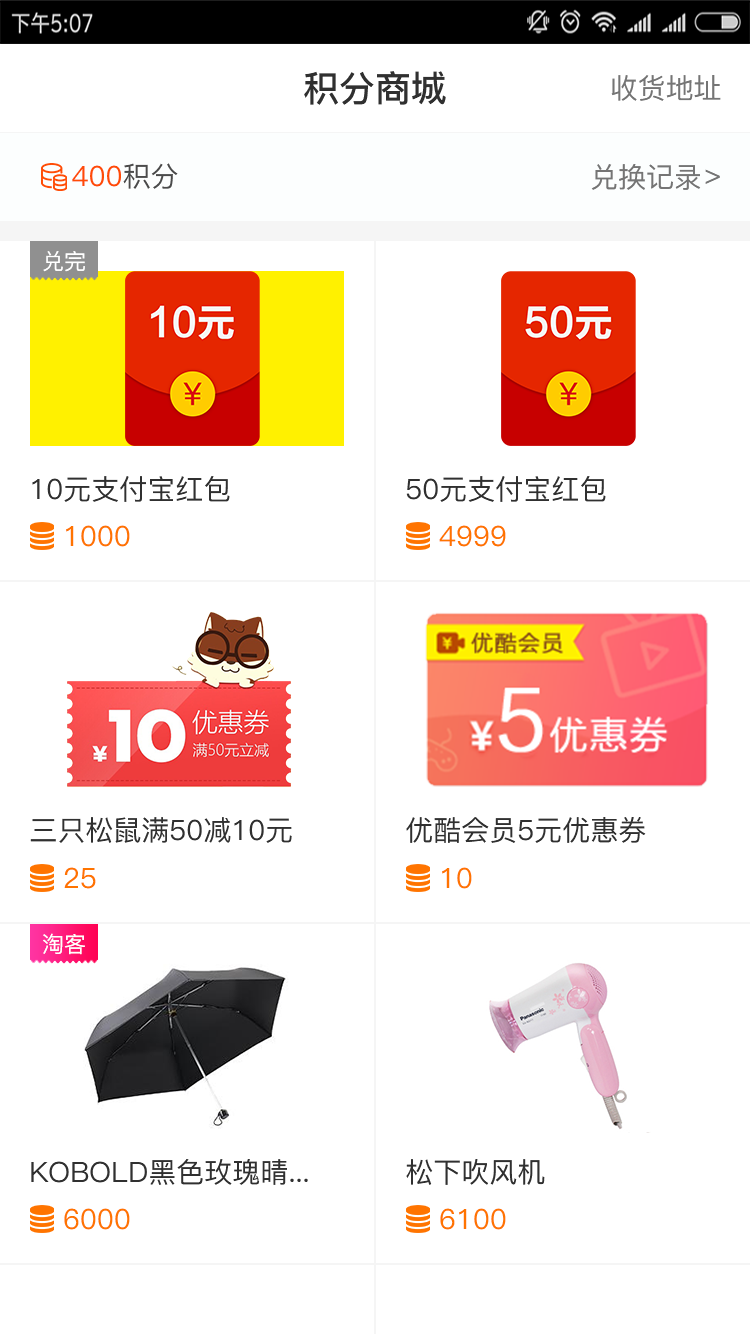
<style>
.page{position:relative;width:750px;height:1334px;background:#ffffff}
.page>*{position:absolute;margin:0}
.t1{font:36px "PingFang-SC-Bold";color:#303030}
.t2{font:28px "PingFang-SC-Medium";color:#757575}
.t3{font:28px "PingFang-SC-Medium";color:#ff4c06}
.t4{font:28px "PingFang-SC-Medium";color:#4b4b4b}
.t5{font:22px "PingFang-SC-Medium";color:#ffffff}
.t6{font:28px "PingFang-SC-Medium";color:#303030}
.t7{font:28px "PingFang-SC-Medium";color:#ff7400}
</style>
<div class="page">
<p class="t1" style="left:304px;top:71px;width:142px;height:34px">积分商城</p>
<p class="t2" style="left:611px;top:75px;width:110px;height:26px">收货地址</p>
<p class="t3" style="left:72px;top:163px;width:106px;height:26px">400<span class="t4">积分</span></p>
<p class="t2" style="left:591px;top:164px;width:110px;height:26px">兑换记录</p>
<p class="t2" style="left:705px;top:169px;width:15px;height:15px">&gt;</p>
<p class="t5" style="left:43px;top:251px;width:42px;height:21px">兑完</p>
<p class="t6" style="left:32px;top:476px;width:198px;height:26px">10元支付宝红包</p>
<p class="t6" style="left:406px;top:476px;width:200px;height:26px">50元支付宝红包</p>
<p class="t7" style="left:66px;top:525px;width:64px;height:22px">1000</p>
<p class="t7" style="left:439px;top:525px;width:67px;height:22px">4999</p>
<p class="t6" style="left:30px;top:817px;width:262px;height:26px">三只松鼠满50减10元</p>
<p class="t6" style="left:406px;top:817px;width:240px;height:26px">优酷会员5元优惠券</p>
<p class="t7" style="left:64px;top:867px;width:32px;height:22px">25</p>
<p class="t7" style="left:442px;top:867px;width:30px;height:22px">10</p>
<p class="t5" style="left:43px;top:933px;width:42px;height:22px">淘客</p>
<p class="t6" style="left:31px;top:1159px;width:277px;height:26px">KOBOLD黑色玫瑰晴...</p>
<p class="t6" style="left:406px;top:1159px;width:139px;height:26px">松下吹风机</p>
<p class="t7" style="left:64px;top:1208px;width:66px;height:22px">6000</p>
<p class="t7" style="left:440px;top:1208px;width:66px;height:22px">6100</p>
</div>
